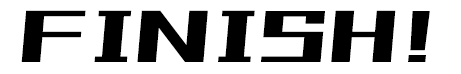
<style>
.page{position:relative;width:461px;height:74px;background:#ffffff}
.page>*{position:absolute;margin:0}
.t1{font:90px "851Gkktt";color:#000000}
</style>
<div class="page">
<p class="t1" style="left:21px;top:10px;width:409px;height:52px">FINISH!</p>
</div>
